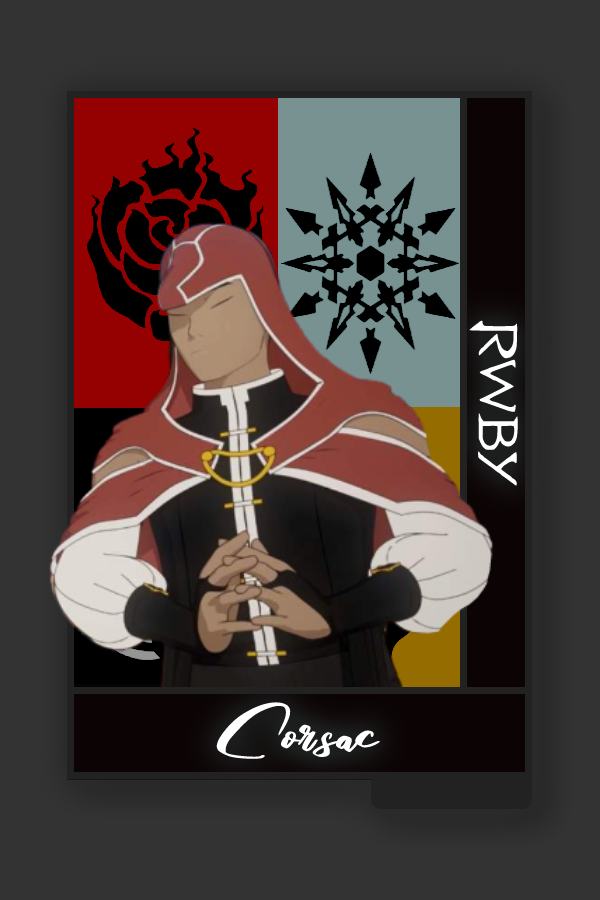
<style>
.page{position:relative;width:600px;height:900px;background:#333333}
.page>*{position:absolute;margin:0}
.t1{font:61.3px "RWBY_Style";color:#ffffff;scale:1.25 1}
.t2{font:75px "RosegaFREE";color:#ffffff}
</style>
<div class="page">
<p class="t1" style="left:469px;top:320px;width:49px;height:166px;rotate:90deg">RWBY</p>
<p class="t2" style="left:216px;top:702px;width:165px;height:57px">Corsac</p>
</div>
